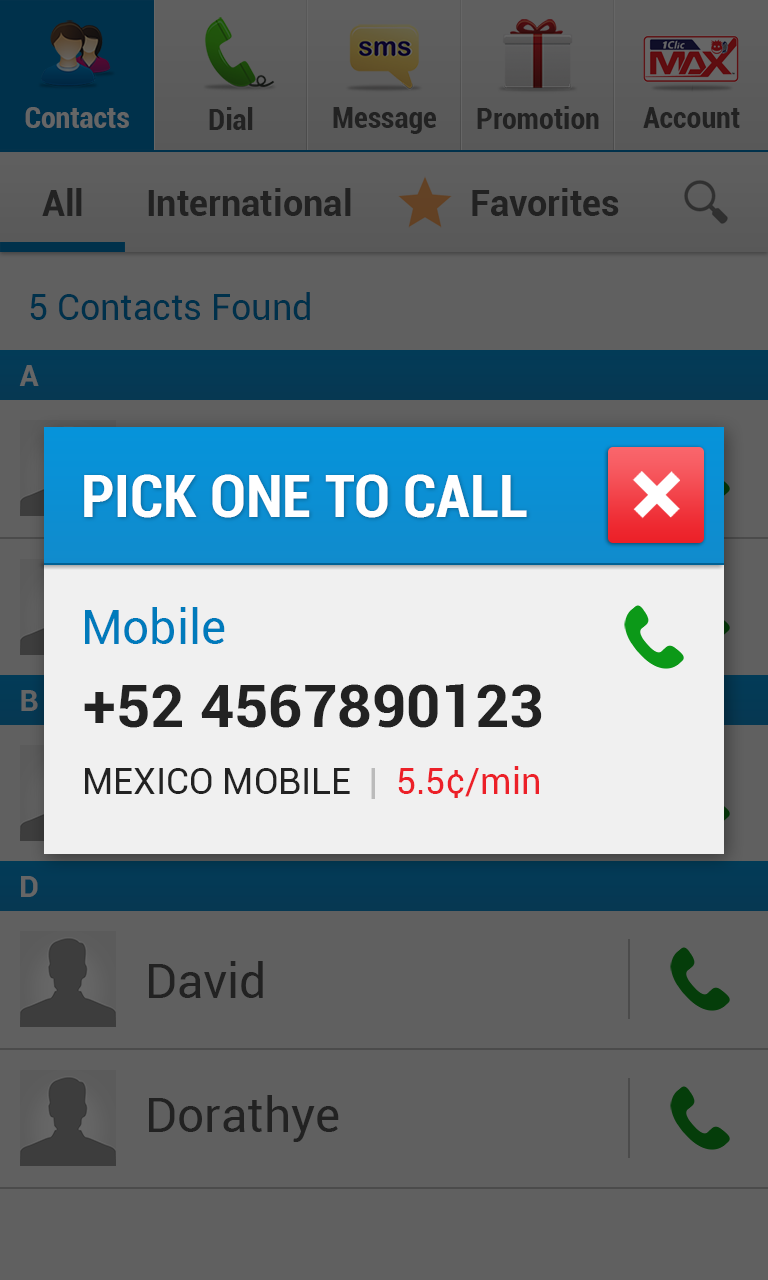
<style>
.page{position:relative;width:768px;height:1280px;background:#606060}
.page>*{position:absolute;margin:0}
.t1{font:30px "Roboto-BoldCondensed";color:#666666}
.t2{font:30px "Roboto-BoldCondensed";color:#222222}
.t3{font:36px "Roboto-Bold";color:#222222}
.t4{font:36px "Roboto-Regular";color:#00314b}
.t5{font:30px "Roboto-Bold";color:#666666}
.t6{font:60px "Roboto-BoldCondensed";color:#ffffff}
.t7{font:48px "Roboto-Regular";color:#007abb}
.t8{font:60px "Roboto-Bold";color:#222222}
.t9{font:36px "Roboto-Regular";color:#222222}
.t10{font:36px "Roboto-Regular";color:#bbbbbb}
.t11{font:36px "Roboto-Regular";color:#ec2028}
.t12{font:48px "Roboto-Regular";color:#222222}
</style>
<div class="page">
<p class="t1" style="left:25px;top:107px;width:104px;height:21px">Contacts</p>
<p class="t2" style="left:209px;top:107px;width:44px;height:23px">Dial</p>
<p class="t2" style="left:333px;top:107px;width:103px;height:27px">Message</p>
<p class="t2" style="left:477px;top:106px;width:122px;height:23px">Promotion</p>
<p class="t2" style="left:643px;top:107px;width:97px;height:21px">Account</p>
<p class="t3" style="left:42px;top:188px;width:40px;height:28px">All</p>
<p class="t3" style="left:148px;top:188px;width:203px;height:28px">International</p>
<p class="t3" style="left:472px;top:188px;width:147px;height:28px">Favorites</p>
<p class="t4" style="left:30px;top:292px;width:280px;height:28px">5 Contacts Found</p>
<p class="t5" style="left:19px;top:365px;width:20px;height:21px">A</p>
<p class="t6" style="left:84px;top:474px;width:443px;height:44px">PICK ONE TO CALL</p>
<p class="t7" style="left:85px;top:607px;width:140px;height:37px">Mobile</p>
<p class="t8" style="left:84px;top:684px;width:458px;height:44px">+52 4567890123</p>
<p class="t5" style="left:21px;top:690px;width:17px;height:21px">B</p>
<p class="t9" style="left:85px;top:766px;width:454px;height:33px">MEXICO MOBILE<span class="t10">  |  </span><span class="t11">5.5¢/min</span></p>
<p class="t5" style="left:21px;top:876px;width:17px;height:21px">D</p>
<p class="t12" style="left:149px;top:961px;width:114px;height:37px">David</p>
<p class="t12" style="left:149px;top:1095px;width:190px;height:47px">Dorathye</p>
</div>
